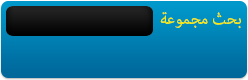
<style>
.page{position:relative;width:248px;height:80px}
.page>*{position:absolute;margin:0}
.t1{font:22px "AdobeArabic-Regular";color:#f9eb06}
</style>
<div class="page">
<p class="t1" style="left:160px;top:12px;width:81px;height:17px">بحث مجموعة</p>
</div>
